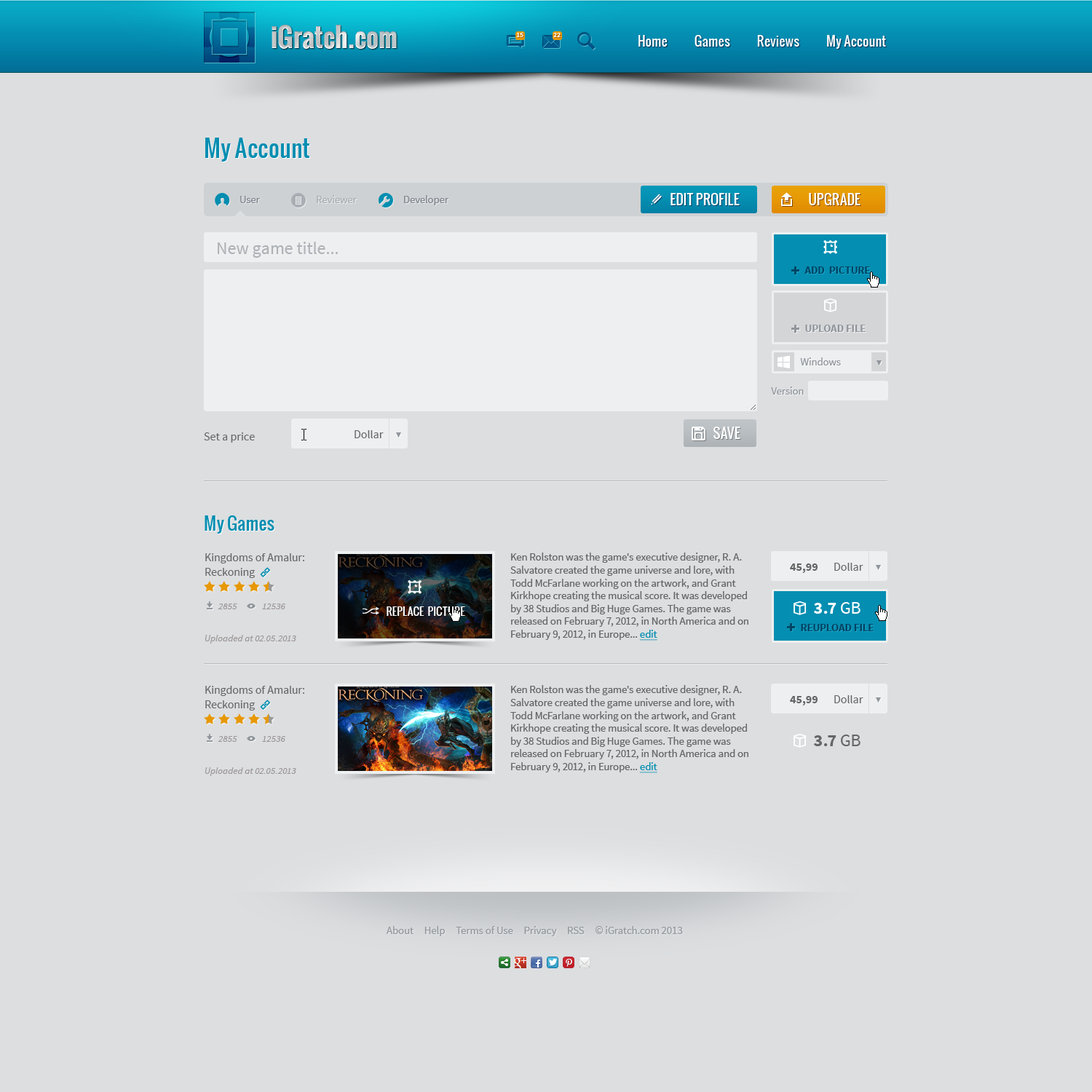
<style>
.page{position:relative;width:1092px;height:1092px;background:#dcdee0}
.page>*{position:absolute;margin:0}
.t1{font:26.2px "Oswald-Bold";color:#c2c6c8}
.t2{font:6.8px "SourceSansPro-Bold";color:#ffffff}
.t3{font:13.1px "Oswald";color:#fffefe}
.t4{font:23.3px "Oswald";color:#048eb1}
.t5{font:10.7px "SourceSansPro-Regular";color:#7f868f}
.t6{font:10.7px "SourceSansPro-Regular";color:#a9aeb4}
.t7{font:13.6px "Oswald";color:#ffffff}
.t8{font:17.5px "SourceSansPro-Regular";color:#aeb2b6}
.t9{font:10.7px "SourceSansPro-Bold";color:#004565}
.t10{font:10.7px "SourceSansPro-Bold";color:#91969c}
.t11{font:10.7px "SourceSansPro-Regular";color:#91969c}
.t12{font:11.6px "SourceSansPro-Regular";color:#666666}
.t13{font:17.5px "Oswald";color:#048eb1}
.t14{font:10.7px "SourceSansPro-Regular";color:#666666}
.t15{font:10.7px "SourceSansPro-Regular";color:#048eb1;text-decoration:underline}
.t16{font:11.6px "SourceSansPro-Bold";color:#666666}
.t17{font:9.7px "SourceSansPro-It";color:#9d9797}
.t18{font:17.5px "SourceSansPro-Bold";color:#ffffff}
.t19{font:17.5px "SourceSansPro-Regular";color:#ffffff}
.t20{font:10.7px "Oswald";color:#ffffff}
.t21{font:17.5px "SourceSansPro-Bold";color:#666666}
.t22{font:17.5px "SourceSansPro-Regular";color:#666666}
.t23{font:10.7px "SourceSansPro-Regular";color:#94989d}
</style>
<div class="page">
<p class="t1" style="left:272px;top:25px;width:125px;height:24px">iGratch.com</p>
<p class="t2" style="left:516px;top:33px;width:7px;height:4px">15</p>
<p class="t2" style="left:553px;top:33px;width:8px;height:4px">22</p>
<p class="t3" style="left:638px;top:35px;width:248px;height:14px">Home            Games            Reviews            My Account</p>
<p class="t4" style="left:205px;top:138px;width:104px;height:24px">My Account</p>
<p class="t5" style="left:240px;top:196px;width:20px;height:7px">User</p>
<p class="t6" style="left:317px;top:195px;width:40px;height:8px">Reviewer</p>
<p class="t5" style="left:404px;top:195px;width:45px;height:10px">Developer</p>
<p class="t7" style="left:670px;top:193px;width:70px;height:12px">EDIT PROFILE</p>
<p class="t7" style="left:809px;top:193px;width:51px;height:12px">UPGRADE</p>
<p class="t8" style="left:218px;top:242px;width:120px;height:16px">New game title...</p>
<p class="t9" style="left:804px;top:266px;width:66px;height:8px">ADD  PICTURE</p>
<p class="t10" style="left:805px;top:325px;width:61px;height:7px">UPLOAD FILE</p>
<p class="t11" style="left:800px;top:357px;width:41px;height:8px">Windows</p>
<p class="t11" style="left:771px;top:387px;width:33px;height:8px">Version</p>
<p class="t12" style="left:204px;top:432px;width:51px;height:11px">Set a price</p>
<p class="t12" style="left:355px;top:430px;width:29px;height:8px">Dollar</p>
<p class="t7" style="left:713px;top:427px;width:27px;height:12px">SAVE</p>
<p class="t13" style="left:205px;top:515px;width:69px;height:19px">My Games</p>
<p class="t12" style="left:205px;top:553px;width:99px;height:25px">Kingdoms of Amalur: Reckoning</p>
<p class="t14" style="left:510px;top:553px;width:238px;height:88px">Ken Rolston was the game's executive designer, R. A. Salvatore created the game universe and lore, with Todd McFarlane working on the artwork, and Grant Kirkhope creating the musical score. It was developed by 38 Studios and Big Huge Games. The game was released on February 7, 2012, in North America and on February 9, 2012, in Europe... <span class="t15">edit</span></p>
<p class="t16" style="left:790px;top:563px;width:28px;height:10px">45,99</p>
<p class="t12" style="left:834px;top:563px;width:29px;height:8px">Dollar</p>
<p class="t17" style="left:218px;top:604px;width:19px;height:5px">2855</p>
<p class="t17" style="left:262px;top:604px;width:23px;height:5px">12536</p>
<p class="t18" style="left:814px;top:602px;width:46px;height:12px">3.7<span class="t19"> GB</span></p>
<p class="t20" style="left:387px;top:606px;width:78px;height:10px">REPLACE  PICTURE</p>
<p class="t9" style="left:801px;top:624px;width:73px;height:7px">REUPLOAD FILE</p>
<p class="t17" style="left:205px;top:635px;width:91px;height:9px">Uploaded at 02.05.2013</p>
<p class="t12" style="left:205px;top:686px;width:99px;height:25px">Kingdoms of Amalur: Reckoning</p>
<p class="t14" style="left:510px;top:685px;width:238px;height:88px">Ken Rolston was the game's executive designer, R. A. Salvatore created the game universe and lore, with Todd McFarlane working on the artwork, and Grant Kirkhope creating the musical score. It was developed by 38 Studios and Big Huge Games. The game was released on February 7, 2012, in North America and on February 9, 2012, in Europe... <span class="t15">edit</span></p>
<p class="t16" style="left:790px;top:696px;width:28px;height:9px">45,99</p>
<p class="t12" style="left:834px;top:695px;width:29px;height:8px">Dollar</p>
<p class="t17" style="left:218px;top:736px;width:19px;height:6px">2855</p>
<p class="t17" style="left:262px;top:736px;width:23px;height:6px">12536</p>
<p class="t21" style="left:814px;top:735px;width:46px;height:11px">3.7<span class="t22"> GB</span></p>
<p class="t17" style="left:205px;top:767px;width:91px;height:9px">Uploaded at 02.05.2013</p>
<p class="t23" style="left:386px;top:926px;width:297px;height:10px">About     Help     Terms of Use     Privacy     RSS     © iGratch.com 2013</p>
</div>
